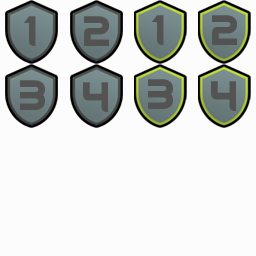
<style>
.page{position:relative;width:256px;height:256px;background:#fcfcfc}
.page>*{position:absolute;margin:0}
.t1{font:36px "RimWordFont";letter-spacing:0.02em;color:#535353}
</style>
<div class="page">
<p class="t1" style="left:24px;top:16px;width:12px;height:30px">1</p>
<p class="t1" style="left:84px;top:16px;width:25px;height:30px">2</p>
<p class="t1" style="left:152px;top:15px;width:12px;height:30px">1</p>
<p class="t1" style="left:212px;top:15px;width:25px;height:30px">2</p>
<p class="t1" style="left:20px;top:80px;width:25px;height:30px">3</p>
<p class="t1" style="left:83px;top:82px;width:25px;height:30px">4</p>
<p class="t1" style="left:148px;top:79px;width:25px;height:30px">3</p>
<p class="t1" style="left:211px;top:81px;width:25px;height:30px">4</p>
</div>
